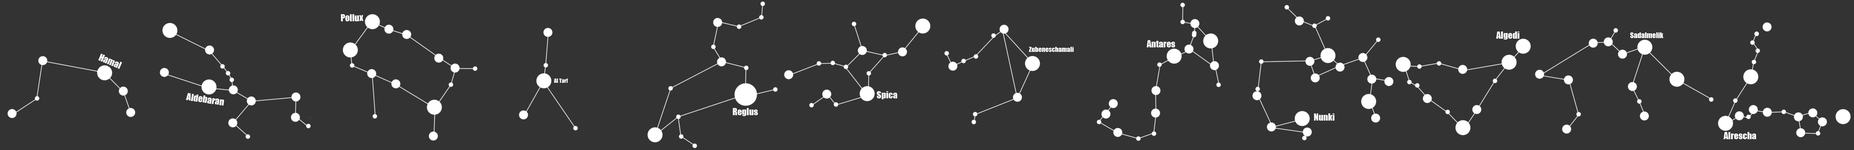
<style>
.page{position:relative;width:1854px;height:150px;background:#333333}
.page>*{position:absolute;margin:0}
.t1{font:9px "Impact";color:#ffffff}
.t2{font:7.2px "Impact";color:#ffffff}
.t3{font:6.6px "Impact";color:#ffffff}
.t4{font:5.4px "Impact";color:#ffffff}
</style>
<div class="page">
<p class="t1" style="left:341px;top:14px;width:23px;height:8px;rotate:-1deg">Pollux</p>
<p class="t1" style="left:1147px;top:40px;width:28px;height:7px">Antares</p>
<p class="t1" style="left:1496px;top:32px;width:24px;height:8px">Algedi</p>
<p class="t2" style="left:1630px;top:32px;width:34px;height:6px">Sadalmelik</p>
<p class="t1" style="left:98px;top:53px;width:24px;height:16px;rotate:23deg">Hamal</p>
<p class="t3" style="left:1029px;top:47px;width:45px;height:5px">Zubeneschamali</p>
<p class="t4" style="left:554px;top:78px;width:14px;height:5px">Al Tarf</p>
<p class="t1" style="left:186px;top:93px;width:38px;height:13px;rotate:8deg">Aldebaran</p>
<p class="t1" style="left:877px;top:91px;width:20px;height:8px">Spica</p>
<p class="t1" style="left:733px;top:108px;width:25px;height:8px">Reglus</p>
<p class="t1" style="left:1314px;top:113px;width:21px;height:8px">Nunki</p>
<p class="t1" style="left:1724px;top:132px;width:32px;height:7px">Alrescha</p>
</div>
